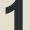
<style>
.page{position:relative;width:30px;height:30px;background:#e3decd}
.page>*{position:absolute;margin:0}
.t1{font:42px "Arial-Black";color:#262e31}
</style>
<div class="page">
<p class="t1" style="left:5px;top:0px;width:18px;height:30px">1</p>
</div>
